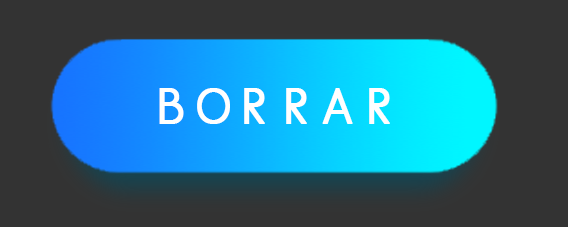
<style>
.page{position:relative;width:568px;height:227px;background:#333333}
.page>*{position:absolute;margin:0}
.t1{font:60px "NormafixedTryout";letter-spacing:0.075em;color:#ffffff;font-weight:bold}
</style>
<div class="page">
<p class="t1" style="left:159px;top:88px;width:231px;height:36px">BORRAR</p>
</div>
